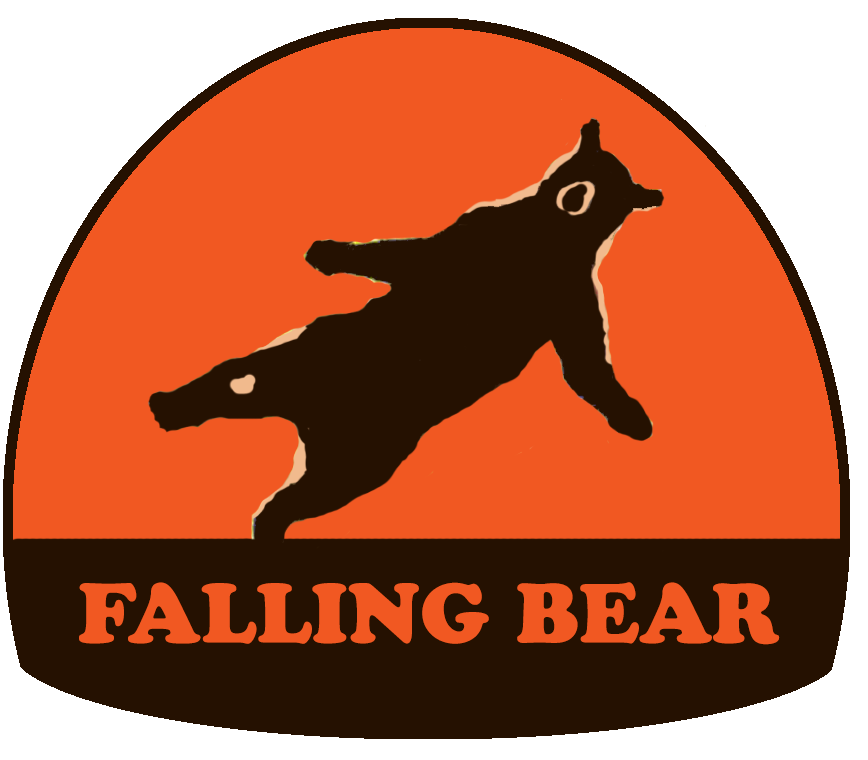
<style>
.page{position:relative;width:868px;height:760px;background:#f15822}
.page>*{position:absolute;margin:0}
.t1{font:83.3px "CooperBlackStd";color:#f15822}
</style>
<div class="page">
<p class="t1" style="left:79px;top:582px;width:701px;height:63px">FALLING BEAR</p>
</div>
